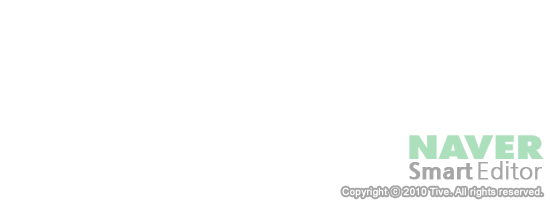
<style>
.page{position:relative;width:550px;height:200px;background:#ffffff}
.page>*{position:absolute;margin:0}
.t1{font:23px "NanumGothic";letter-spacing:-0.01em;color:#a6a6a6;font-weight:bold}
.t2{font:23px "NanumGothicExtraBold";letter-spacing:-0.01em;color:#a6a6a6;font-weight:bold}
.t3{font:10px "ArialMT";color:#ffffff;font-weight:bold}
.t4{font:10px "Gulim";color:#ffffff;font-weight:bold}
</style>
<div class="page">
<p class="t1" style="left:478px;top:161px;width:64px;height:19px">Editor</p>
<p class="t2" style="left:409px;top:162px;width:64px;height:18px">Smart</p>
<p class="t3" style="left:342px;top:187px;width:201px;height:11px;opacity:0.35">Copyright <span class="t4">ⓒ</span> 2010 Tive. All rights reserved.</p>
</div>
